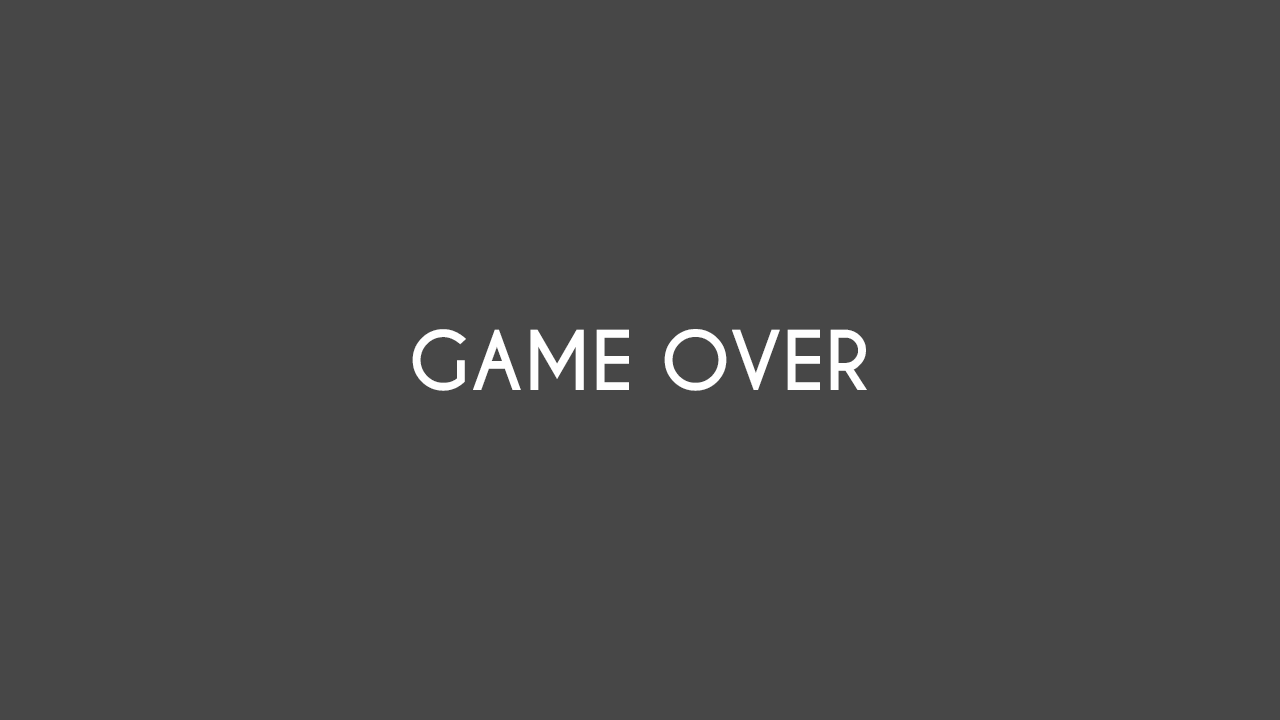
<style>
.page{position:relative;width:1280px;height:720px;background:#474747}
.page>*{position:absolute;margin:0}
.t1{font:77.1px "CaviarDreams-Bold";color:#ffffff}
</style>
<div class="page">
<p class="t1" style="left:412px;top:329px;width:455px;height:62px">GAME OVER</p>
</div>
